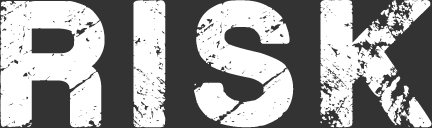
<style>
.page{position:relative;width:432px;height:128px;background:#333333}
.page>*{position:absolute;margin:0}
.t1{font:144px "PlaneCrash";letter-spacing:0.1em;color:#ffffff}
</style>
<div class="page">
<p class="t1" style="left:0px;top:0px;width:432px;height:128px">risk</p>
</div>
